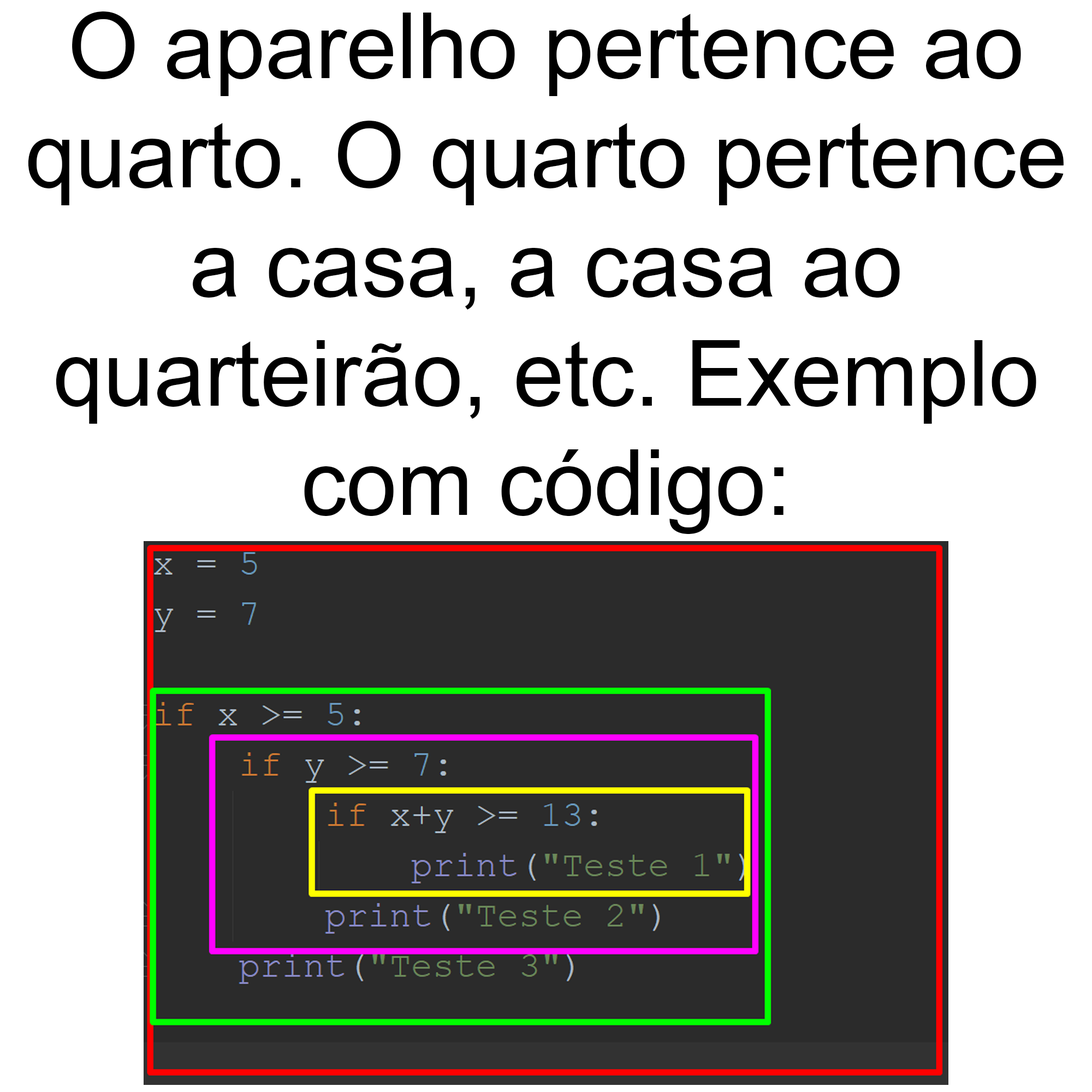
<style>
.page{position:relative;width:1092px;height:1092px;background:#ffffff}
.page>*{position:absolute;margin:0}
.t1{font:91px "ArialMT";color:#000000}
</style>
<div class="page">
<p class="t1" style="left:28px;top:11px;width:1036px;height:523px;text-align:center">O aparelho pertence ao<br>quarto. O quarto pertence<br>a casa, a casa ao<br>quarteirão, etc. Exemplo<br>com código:</p>
</div>
